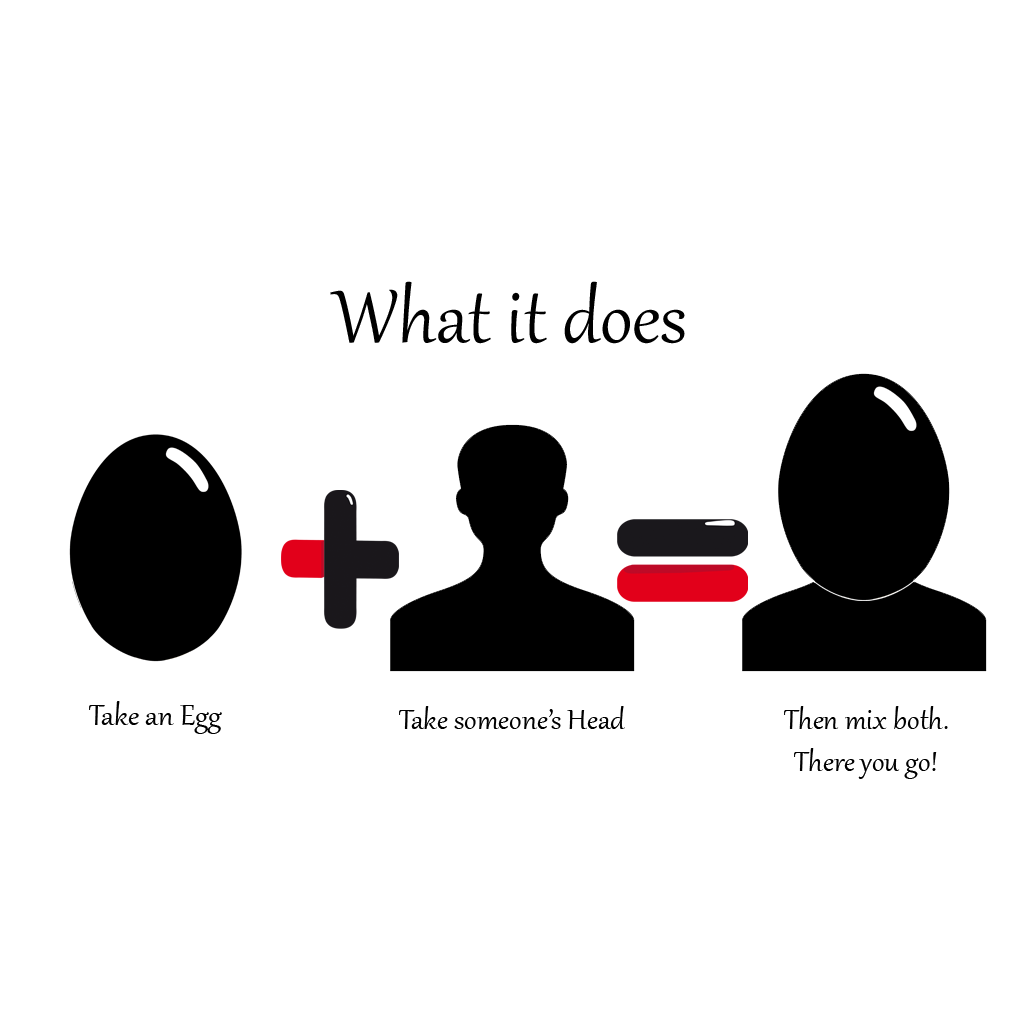
<style>
.page{position:relative;width:1020px;height:1020px;background:#ffffff}
.page>*{position:absolute;margin:0}
.t1{font:90.9px "Gabriola";color:#000000}
.t2{font:36px "Gabriola";color:#000000}
.t3{font:35.2px "Gabriola";color:#000000}
</style>
<div class="page">
<p class="t1" style="left:330px;top:281px;width:355px;height:63px">What it does</p>
<p class="t2" style="left:89px;top:701px;width:133px;height:33px">Take an Egg</p>
<p class="t3" style="left:399px;top:706px;width:226px;height:23px">Take someone’s Head</p>
<p class="t3" style="left:784px;top:706px;width:164px;height:73px;text-align:center">Then mix both.<br>There you go!</p>
</div>
